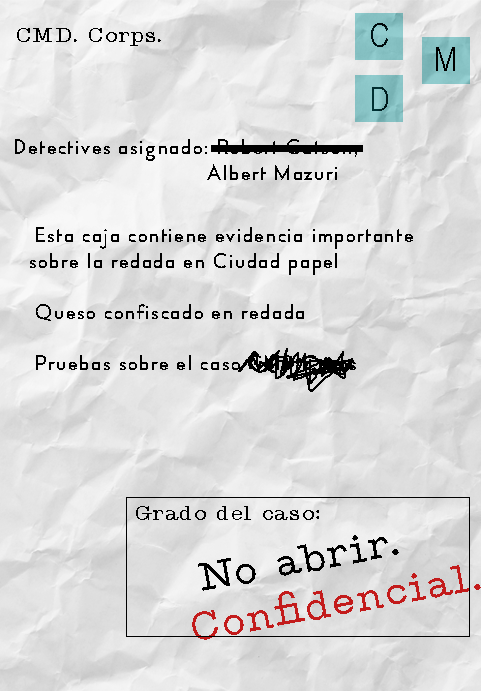
<style>
.page{position:relative;width:481px;height:691px}
.page>*{position:absolute;margin:0}
.t1{font:21.3px "TypeMachine";letter-spacing:0.075em;color:#000000}
.t2{font:33.2px "ArialNarrow";letter-spacing:0.075em;color:#000e10}
.t3{font:33.2px "ArialNarrow";letter-spacing:0.075em;color:#000000}
.t4{font:33.2px "ArialNarrow";letter-spacing:0.075em;color:#002b2d}
.t5{font:21.3px "TypoFormalDemo";letter-spacing:0.075em;color:#000000}
.t6{font:40.3px "TypeMachine";letter-spacing:0.075em;color:#c31b1b}
.t7{font:40.3px "TypeMachine";letter-spacing:0.075em;color:#000000}
</style>
<div class="page">
<p class="t1" style="left:17px;top:28px;width:144px;height:18px">CMD. Corps.</p>
<p class="t2" style="left:371px;top:23px;width:17px;height:24px">C</p>
<p class="t3" style="left:436px;top:47px;width:19px;height:24px">M</p>
<p class="t4" style="left:372px;top:87px;width:16px;height:24px">D</p>
<p class="t5" style="left:15px;top:139px;width:342px;height:41px">Detectives asignado: Robert Catson, <br>       Albert Mazuri</p>
<p class="t5" style="left:30px;top:227px;width:383px;height:150px">Esta caja contiene evidencia importante <br>sobre la redada en Ciudad papel<br><br> Queso confiscado en redada<br><br> Pruebas sobre el caso CMD Corps</p>
<p class="t1" style="left:136px;top:506px;width:183px;height:14px">Grado del caso:</p>
<p class="t6" style="left:192px;top:535px;width:289px;height:105px;rotate:-10deg"><span class="t7"> No abrir. <br></span>Confidencial.</p>
</div>
